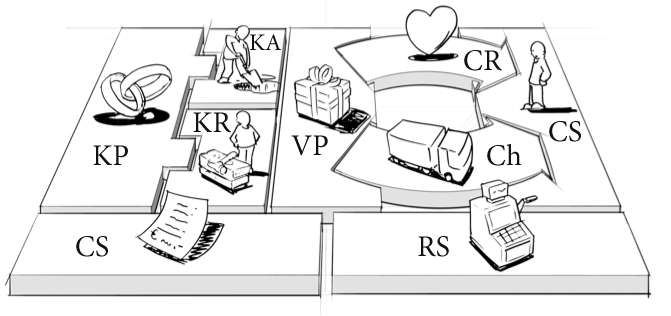
<style>
.page{position:relative;width:671px;height:316px;background:#ffffff}
.page>*{position:absolute;margin:0}
.t1{font:24px "MinionPro-Regular";color:#121212}
.t2{font:30px "MinionPro-Regular";color:#121212}
</style>
<div class="page">
<p class="t1" style="left:250px;top:34px;width:31px;height:16px">KA</p>
<p class="t2" style="left:464px;top:50px;width:38px;height:21px">CR</p>
<p class="t2" style="left:193px;top:112px;width:39px;height:21px">KR</p>
<p class="t2" style="left:549px;top:121px;width:32px;height:21px">CS</p>
<p class="t2" style="left:291px;top:135px;width:37px;height:21px">VP</p>
<p class="t2" style="left:93px;top:145px;width:35px;height:20px">KP</p>
<p class="t2" style="left:487px;top:143px;width:35px;height:23px">Ch</p>
<p class="t2" style="left:76px;top:236px;width:32px;height:21px">CS</p>
<p class="t2" style="left:418px;top:236px;width:31px;height:21px">RS</p>
</div>
